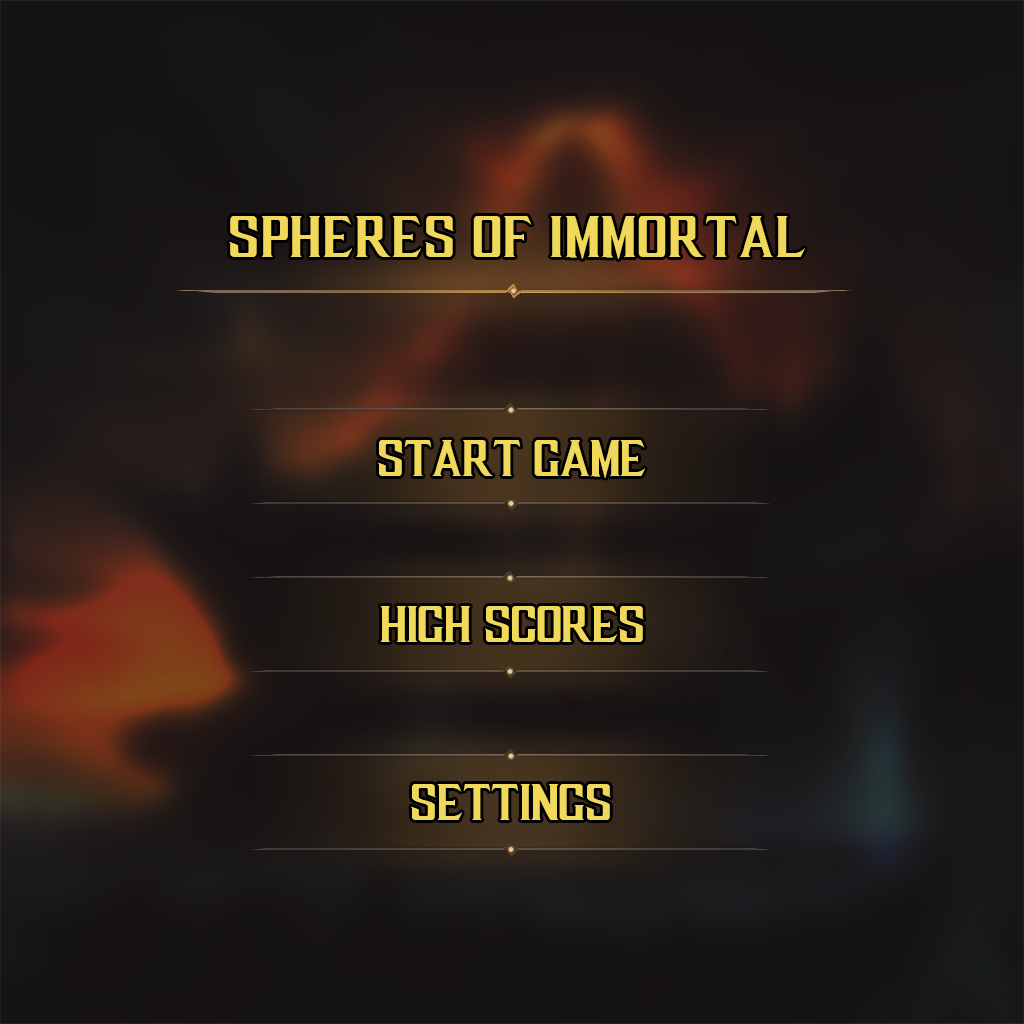
<style>
.page{position:relative;width:1024px;height:1024px}
.page>*{position:absolute;margin:0}
.t1{font:60px "MKXTitle";letter-spacing:0.025em;color:#efd85a}
.t2{font:52px "MKXTitle";color:#efd85a}
</style>
<div class="page">
<p class="t1" style="left:229px;top:216px;width:576px;height:43px">SPHERES OF IMMORTAL</p>
<p class="t2" style="left:378px;top:440px;width:267px;height:38px">START GAME</p>
<p class="t2" style="left:380px;top:606px;width:264px;height:36px">HIGH SCORES</p>
<p class="t2" style="left:411px;top:784px;width:200px;height:36px">SETTINGS</p>
</div>
